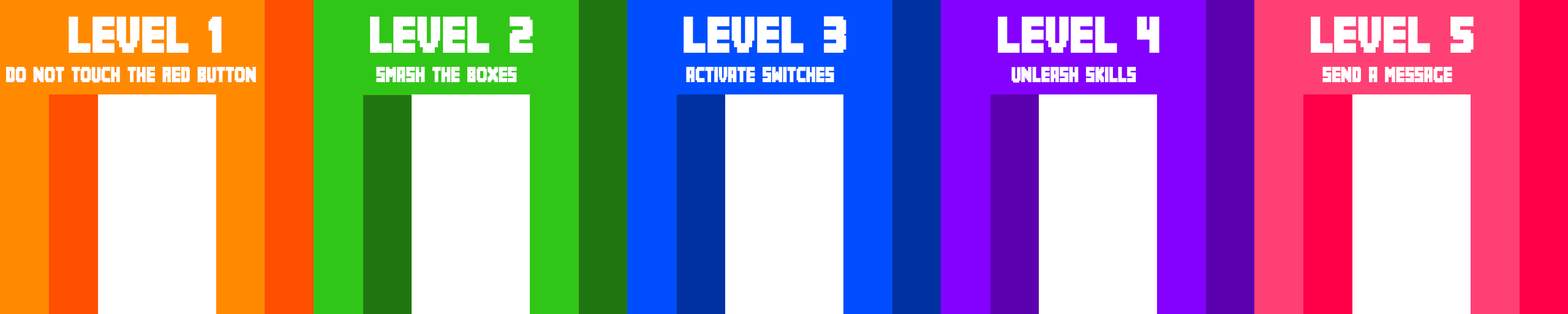
<style>
.page{position:relative;width:1568px;height:314px;background:#ffffff}
.page>*{position:absolute;margin:0}
.t1{font:45.9px "Minecrafter";color:#ffffff;scale:0.8 1}
.t2{font:19.6px "Minecrafter";color:#ffffff;scale:0.7 1}
</style>
<div class="page">
<p class="t1" style="left:69px;top:17px;width:153px;height:36px">LEVEL 1</p>
<p class="t1" style="left:370px;top:17px;width:163px;height:36px">LEVEL 2</p>
<p class="t1" style="left:684px;top:16px;width:162px;height:37px">LEVEL 3</p>
<p class="t1" style="left:998px;top:17px;width:161px;height:36px">LEVEL 4</p>
<p class="t1" style="left:1311px;top:17px;width:163px;height:36px">LEVEL 5</p>
<p class="t2" style="left:6px;top:67px;width:250px;height:16px">DO NOT TOUCH THE RED BUTTON</p>
<p class="t2" style="left:376px;top:67px;width:141px;height:15px">SMASH THE BOXES</p>
<p class="t2" style="left:686px;top:67px;width:148px;height:15px">ACTIVATE SWITCHES</p>
<p class="t2" style="left:1011px;top:67px;width:125px;height:16px">UNLEASH SKILLS</p>
<p class="t2" style="left:1322px;top:67px;width:130px;height:16px">SEND A MESSAGE</p>
</div>
